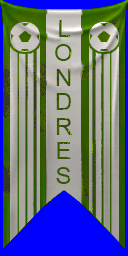
<style>
.page{position:relative;width:128px;height:256px;background:#0000ff}
.page>*{position:absolute;margin:0}
.t1{font:24px/24.5px "ArialMT";letter-spacing:0.04em;color:#345900;text-transform:uppercase}
</style>
<div class="page">
<p class="t1" style="left:55px;top:20px;width:17px;height:164px;text-align:center">l<br>o<br>n<br>d<br>r<br>e<br>s</p>
</div>
